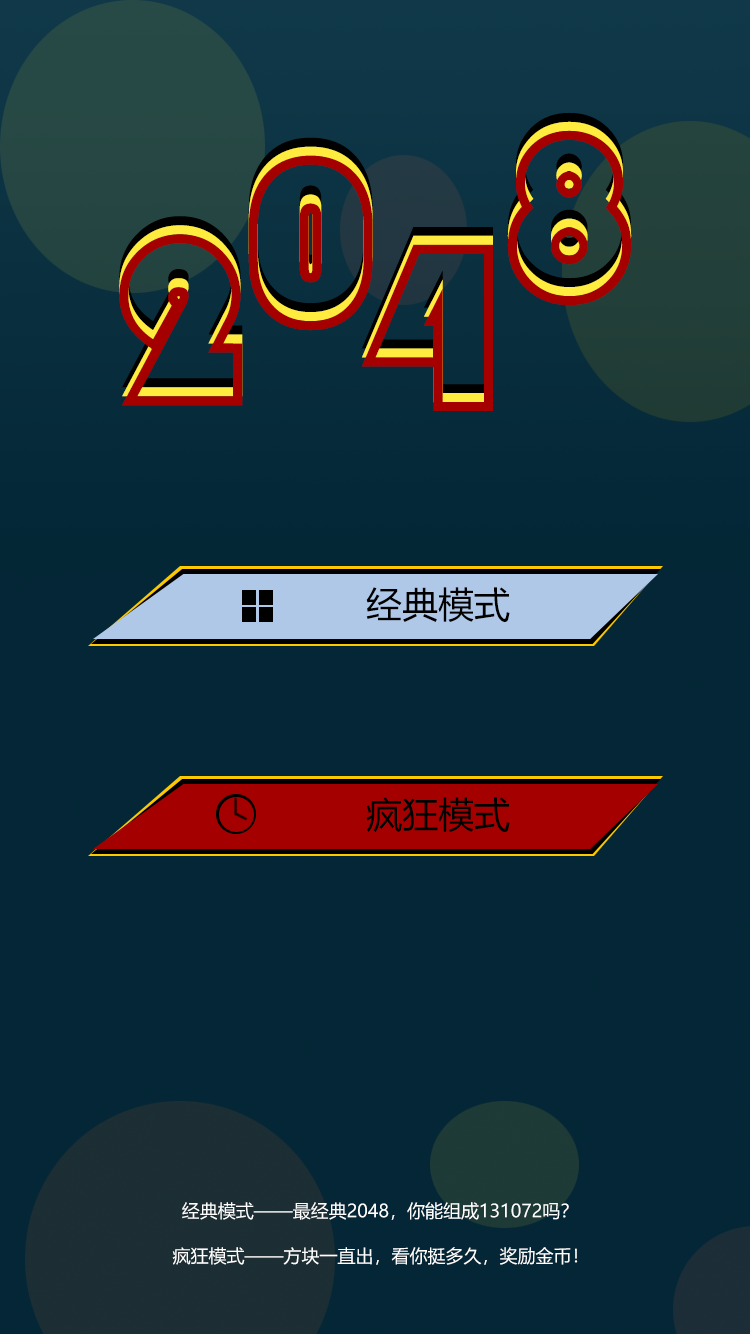
<style>
.page{position:relative;width:750px;height:1334px;background:#042636}
.page>*{position:absolute;margin:0}
.t1{font:236.7px "STCaiyun"}
.t2{font:237px "STCaiyun"}
.t3{font:236.7px "STCaiyun";color:#a40000}
.t4{font:237px "STCaiyun";color:#a40000}
.t5{font:237.2px "STCaiyun"}
.t6{font:236.8px "STCaiyun"}
.t7{font:236.8px "STCaiyun";color:#a40000}
.t8{font:36px "MicrosoftYaHei";color:#000000}
.t9{font:18.1px "MicrosoftYaHei";color:#ffffff}
</style>
<div class="page">
<p class="t1" style="left:507px;top:112px;width:125px;height:176px">8</p>
<p class="t1" style="left:507px;top:121px;width:125px;height:176px">8</p>
<p class="t2" style="left:248px;top:137px;width:125px;height:176px">0</p>
<p class="t3" style="left:507px;top:130px;width:125px;height:175px">8</p>
<p class="t2" style="left:248px;top:146px;width:125px;height:176px">0</p>
<p class="t4" style="left:248px;top:155px;width:125px;height:176px">0</p>
<p class="t5" style="left:119px;top:216px;width:124px;height:172px">2</p>
<p class="t2" style="left:119px;top:225px;width:124px;height:172px">2</p>
<p class="t6" style="left:362px;top:227px;width:131px;height:167px">4</p>
<p class="t4" style="left:119px;top:234px;width:124px;height:172px">2</p>
<p class="t6" style="left:362px;top:235px;width:131px;height:168px">4</p>
<p class="t7" style="left:362px;top:244px;width:131px;height:167px">4</p>
<p class="t8" style="left:366px;top:587px;width:144px;height:35px">经典模式</p>
<p class="t8" style="left:366px;top:797px;width:144px;height:35px">疯狂模式</p>
<p class="t9" style="left:182px;top:1202px;width:387px;height:18px">经典模式——最经典2048，你能组成131072吗？</p>
<p class="t9" style="left:172px;top:1247px;width:406px;height:18px">疯狂模式——方块一直出，看你挺多久，奖励金币！</p>
</div>
